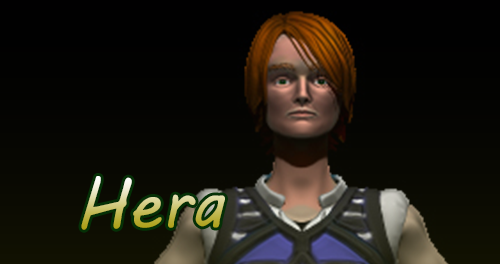
<style>
.page{position:relative;width:500px;height:264px}
.page>*{position:absolute;margin:0}
.t1{font:69px "MVBoli"}
</style>
<div class="page">
<p class="t1" style="left:81px;top:176px;width:144px;height:54px">Hera</p>
</div>
